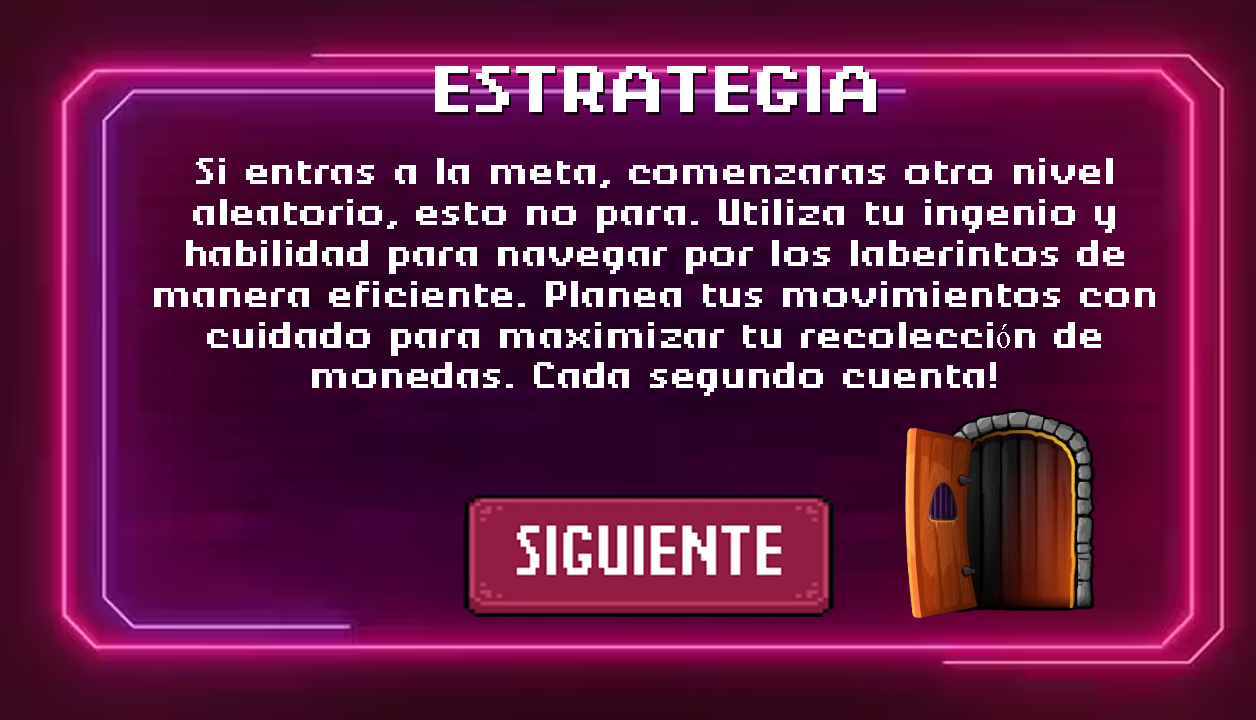
<style>
.page{position:relative;width:1256px;height:720px}
.page>*{position:absolute;margin:0}
.t1{font:60px "BerkeliumBitmap";color:#ffffff}
.t2{font:34.1px "BerkeliumBitmap";color:#ffffff;scale:0.91 1}
.t3{font:34.1px "TimesNewRomanPSMT";color:#ffffff;scale:0.91 1}
</style>
<div class="page">
<p class="t1" style="left:435px;top:66px;width:441px;height:46px">ESTRATEGIA</p>
<p class="t2" style="left:154px;top:158px;width:1001px;height:238px;text-align:center">Si entras a la meta, comenzaras otro nivel aleatorio, esto no para. Utiliza tu ingenio y habilidad para navegar por los laberintos de manera eficiente. Planea tus movimientos con cuidado para maximizar tu recolecci<span class="t3">ó</span>n de monedas. Cada segundo cuenta!</p>
</div>
